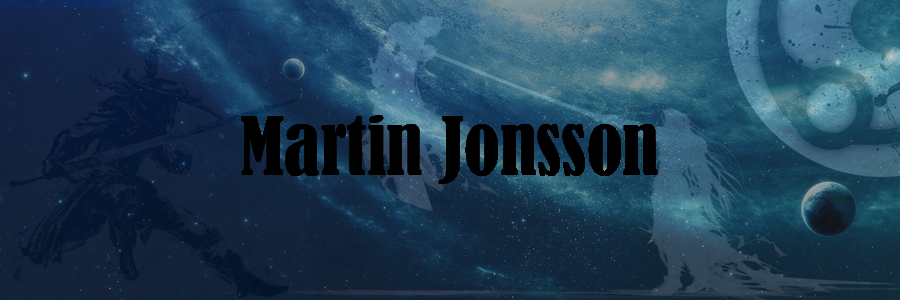
<style>
.page{position:relative;width:900px;height:300px}
.page>*{position:absolute;margin:0}
.t1{font:75px "BernardMT-Condensed";color:#000000}
</style>
<div class="page">
<p class="t1" style="left:241px;top:115px;width:417px;height:69px">Martin Jonsson</p>
</div>
